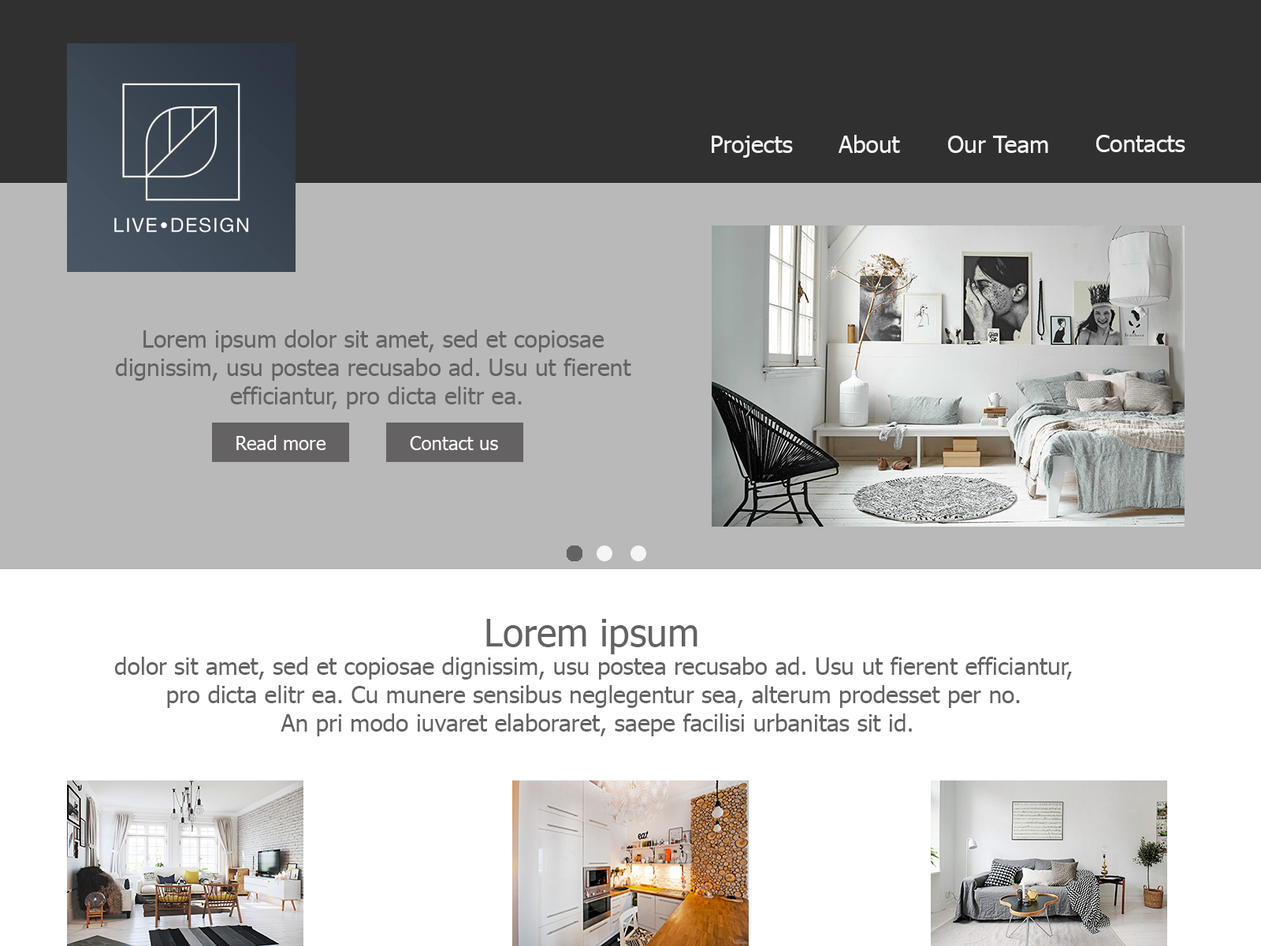
<style>
.page{position:relative;width:1261px;height:946px;background:#ffffff}
.page>*{position:absolute;margin:0}
.t1{font:23.6px "Tahoma";color:#f7f4f4}
.t2{font:23.6px "Tahoma";color:#646262}
.t3{font:18.9px "Tahoma";color:#fdfcfc}
.t4{font:37.8px "Tahoma";color:#646262}
</style>
<div class="page">
<p class="t1" style="left:712px;top:136px;width:81px;height:22px">Projects</p>
<p class="t1" style="left:839px;top:135px;width:61px;height:18px">About</p>
<p class="t1" style="left:948px;top:136px;width:100px;height:17px">Our Team</p>
<p class="t1" style="left:1096px;top:135px;width:89px;height:17px">Contacts</p>
<p class="t2" style="left:115px;top:329px;width:516px;height:80px;text-align:center">Lorem ipsum dolor sit amet, sed et copiosae <br>dignissim, usu postea recusabo ad. Usu ut fierent <br>efficiantur, pro dicta elitr ea.</p>
<p class="t3" style="left:236px;top:435px;width:89px;height:15px">Read more</p>
<p class="t3" style="left:410px;top:436px;width:88px;height:14px">Contact us</p>
<p class="t2" style="left:114px;top:619px;width:958px;height:117px;text-align:center"><span class="t4">Lorem ipsum <br></span>dolor sit amet, sed et copiosae dignissim, usu postea recusabo ad. Usu ut fierent efficiantur, <br>pro dicta elitr ea. Cu munere sensibus neglegentur sea, alterum prodesset per no. <br>An pri modo iuvaret elaboraret, saepe facilisi urbanitas sit id.</p>
</div>
